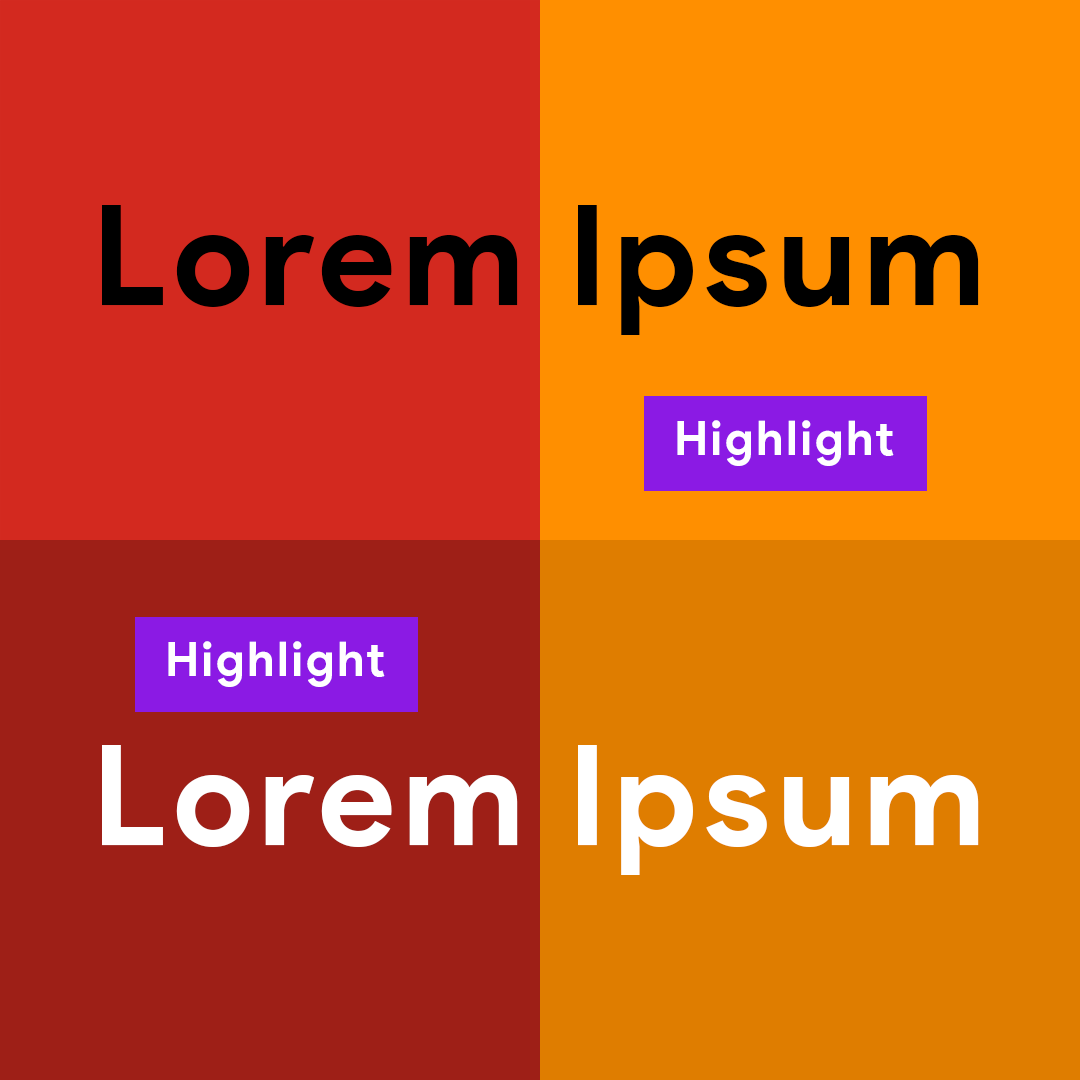
<style>
.page{position:relative;width:1080px;height:1080px;background:#d3291f}
.page>*{position:absolute;margin:0}
.t1{font:138.7px "ProductSans-Bold";letter-spacing:0.05em;color:#000000}
.t2{font:48px "ProductSans-Bold";letter-spacing:0.05em;color:#ffffff}
.t3{font:138.7px "ProductSans-Bold";letter-spacing:0.05em;color:#ffffff}
</style>
<div class="page">
<p class="t1" style="left:102px;top:205px;width:877px;height:130px">Lorem Ipsum</p>
<p class="t2" style="left:677px;top:420px;width:217px;height:46px">Highlight</p>
<p class="t2" style="left:168px;top:641px;width:217px;height:46px">Highlight</p>
<p class="t3" style="left:102px;top:745px;width:877px;height:130px">Lorem Ipsum</p>
</div>
